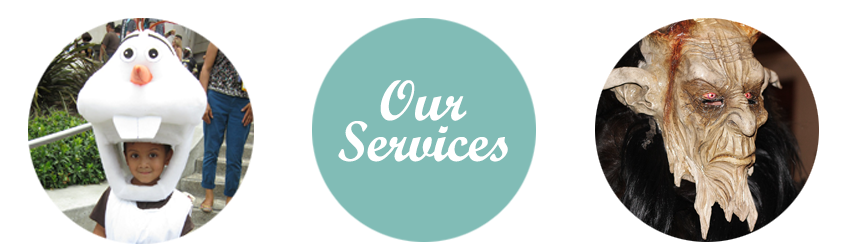
<style>
.page{position:relative;width:850px;height:252px;background:#ffffff}
.page>*{position:absolute;margin:0}
.t1{font:56.9px "ScriptMTBold";color:#ffffff}
</style>
<div class="page">
<p class="t1" style="left:380px;top:80px;width:87px;height:41px">Our</p>
<p class="t1" style="left:338px;top:121px;width:170px;height:41px">Services</p>
</div>
